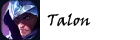
<style>
.page{position:relative;width:140px;height:40px;background:#ffffff}
.page>*{position:absolute;margin:0}
.t1{font:16px "VinerHandITC";color:#000000}
</style>
<div class="page">
<p class="t1" style="left:47px;top:13px;width:44px;height:14px">Talon</p>
</div>
